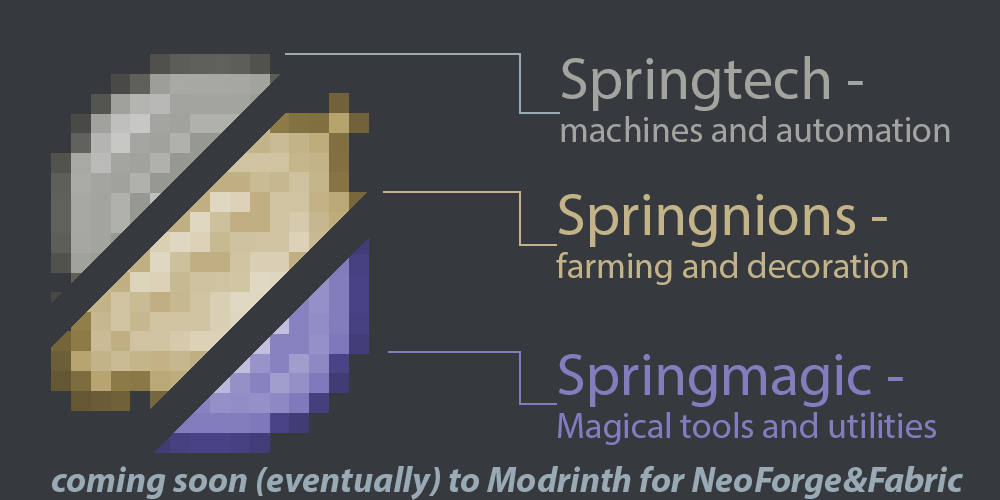
<style>
.page{position:relative;width:1000px;height:500px;background:#36393e}
.page>*{position:absolute;margin:0}
.t1{font:36px "MyriadPro-Regular";color:#a3a3a0}
.t2{font:60px "MyriadPro-Regular";color:#a3a3a0}
.t3{font:36px "MyriadPro-Regular";color:#c3b388}
.t4{font:60px "MyriadPro-Regular";color:#c3b388}
.t5{font:36px "MyriadPro-Regular";color:#827dbd}
.t6{font:60px "MyriadPro-Regular";color:#827dbd}
.t7{font:36px "MyriadPro-BoldIt";color:#99aab5}
</style>
<div class="page">
<p class="t1" style="left:561px;top:56px;width:389px;height:86px"><span class="t2">Springtech -<br></span>machines and automation</p>
<p class="t3" style="left:556px;top:194px;width:352px;height:91px"><span class="t4">Springnions -<br></span>farming and decoration</p>
<p class="t5" style="left:558px;top:354px;width:378px;height:91px"><span class="t6">Springmagic -<br></span>Magical tools and utilities</p>
<p class="t7" style="left:52px;top:466px;width:911px;height:34px">coming soon (eventually) to Modrinth for NeoForge&amp;Fabric</p>
</div>
